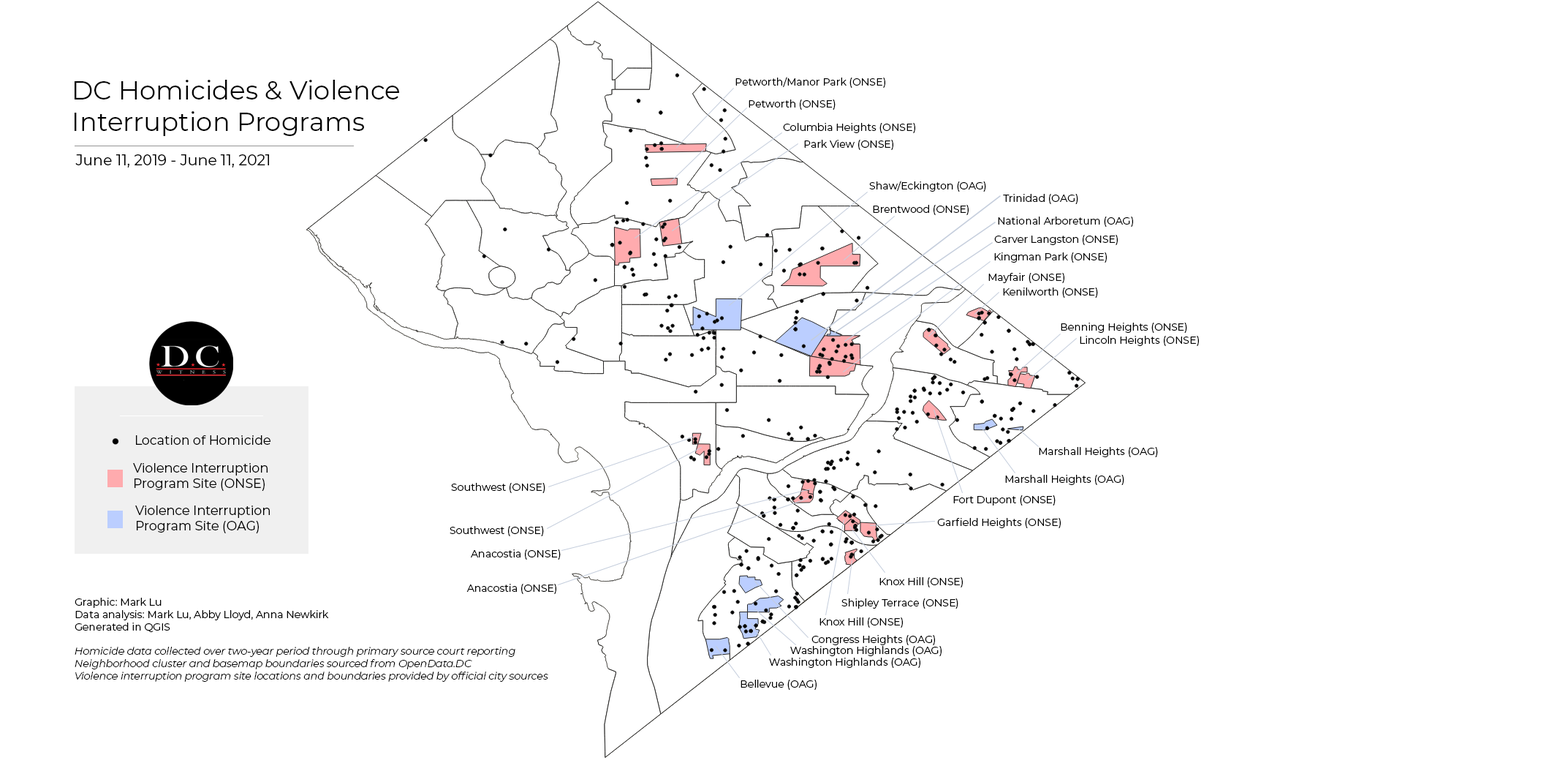
<style>
.page{position:relative;width:1541px;height:774px;background:#ffffff}
.page>*{position:absolute;margin:0}
.t1{font:10.3px "Montserrat-Regular";color:#000000}
.t2{font:26px "Montserrat-Regular";color:#000000}
.t3{font:14.9px "Montserrat-Regular";color:#000000}
.t4{font:12.7px "Montserrat-Regular";color:#000000}
.t5{font:10.3px "Montserrat-LightItalic";color:#000000}
</style>
<div class="page">
<p class="t1" style="left:736px;top:77px;width:149px;height:11px">Petworth/Manor Park (ONSE)</p>
<p class="t2" style="left:75px;top:80px;width:324px;height:56px">DC Homicides &amp; Violence <br>Interruption Programs</p>
<p class="t1" style="left:749px;top:99px;width:87px;height:11px">Petworth (ONSE)</p>
<p class="t1" style="left:783px;top:123px;width:132px;height:10px">Columbia Heights (ONSE)</p>
<p class="t1" style="left:804px;top:140px;width:90px;height:10px">Park View (ONSE)</p>
<p class="t3" style="left:75px;top:154px;width:194px;height:13px">June 11, 2019 - June 11, 2021</p>
<p class="t1" style="left:869px;top:181px;width:117px;height:11px">Shaw/Eckington (OAG)</p>
<p class="t1" style="left:1003px;top:194px;width:76px;height:10px">Trinidad (OAG)</p>
<p class="t1" style="left:873px;top:205px;width:96px;height:10px">Brentwood (ONSE)</p>
<p class="t1" style="left:998px;top:216px;width:135px;height:11px">National Arboretum (OAG)</p>
<p class="t1" style="left:994px;top:235px;width:124px;height:10px">Carver Langston (ONSE)</p>
<p class="t1" style="left:994px;top:252px;width:113px;height:11px">Kingman Park (ONSE)</p>
<p class="t1" style="left:989px;top:273px;width:76px;height:10px">Mayfair (ONSE)</p>
<p class="t1" style="left:1003px;top:287px;width:95px;height:11px">Kenilworth (ONSE)</p>
<p class="t1" style="left:1061px;top:322px;width:126px;height:11px">Benning Heights (ONSE)</p>
<p class="t1" style="left:1080px;top:336px;width:119px;height:10px">Lincoln Heights (ONSE)</p>
<p class="t4" style="left:136px;top:435px;width:135px;height:10px">Location of Homicide</p>
<p class="t1" style="left:1039px;top:447px;width:119px;height:10px">Marshall Heights (OAG)</p>
<p class="t4" style="left:133px;top:463px;width:135px;height:28px">Violence Interruption <br>Program Site (ONSE)</p>
<p class="t1" style="left:451px;top:483px;width:94px;height:10px">Southwest (ONSE)</p>
<p class="t1" style="left:1005px;top:475px;width:120px;height:10px">Marshall Heights (OAG)</p>
<p class="t1" style="left:953px;top:495px;width:103px;height:10px">Fort Dupont (ONSE)</p>
<p class="t4" style="left:135px;top:505px;width:135px;height:28px">Violence Interruption<br>Program Site (OAG)</p>
<p class="t1" style="left:937px;top:518px;width:124px;height:10px">Garfield Heights (ONSE)</p>
<p class="t1" style="left:450px;top:526px;width:94px;height:10px">Southwest (ONSE)</p>
<p class="t1" style="left:471px;top:549px;width:90px;height:10px">Anacostia (ONSE)</p>
<p class="t1" style="left:880px;top:577px;width:83px;height:10px">Knox Hill (ONSE)</p>
<p class="t1" style="left:467px;top:584px;width:89px;height:10px">Anacostia (ONSE)</p>
<p class="t5" style="left:75px;top:597px;width:473px;height:84px"><span class="t1">Graphic: Mark Lu<br>Data analysis: Mark Lu, Abby Lloyd, Anna Newkirk<br>Generated in QGIS<br><br></span>Homicide data collected over two-year period through primary source court reporting<br>Neighborhood cluster and basemap boundaries sourced from OpenData.DC<br>Violence interruption program site locations and boundaries provided by official city sources</p>
<p class="t1" style="left:842px;top:598px;width:117px;height:10px">Shipley Terrace (ONSE)</p>
<p class="t1" style="left:820px;top:617px;width:83px;height:10px">Knox Hill (ONSE)</p>
<p class="t1" style="left:812px;top:635px;width:123px;height:10px">Congress Heights (OAG)</p>
<p class="t1" style="left:790px;top:646px;width:152px;height:10px">Washington Highlands (OAG)</p>
<p class="t1" style="left:769px;top:657px;width:152px;height:11px">Washington Highlands (OAG)</p>
<p class="t1" style="left:741px;top:679px;width:76px;height:11px">Bellevue (OAG)</p>
</div>
